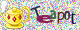
<style>
.page{position:relative;width:80px;height:30px}
.page>*{position:absolute;margin:0}
.t1{font:15.4px "FZLTZHK--GBK1-0";color:#1f2650}
.t2{font:14px "BlackoakStd";color:#8a205a}
.t3{font:14px "HoboStd";color:#45694e}
.t4{font:14px "Monaco";color:#68280b}
.t5{font:16px "MarkerFelt-Thin";color:#47334b}
.t6{font:18px "LaoMN";color:#0a1940}
</style>
<div class="page">
<p class="t1" style="left:30px;top:5px;width:11px;height:15px;rotate:-19deg">T</p>
<p class="t2" style="left:36px;top:15px;width:18px;height:8px">e</p>
<p class="t3" style="left:50px;top:10px;width:7px;height:9px">a</p>
<p class="t4" style="left:57px;top:12px;width:8px;height:11px">p</p>
<p class="t5" style="left:63px;top:11px;width:8px;height:9px">o</p>
<p class="t6" style="left:69px;top:11px;width:7px;height:13px">t</p>
</div>
